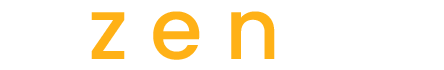
<style>
.page{position:relative;width:444px;height:70px;background:#ffffff}
.page>*{position:absolute;margin:0}
.t1{font:85px "Poppins-Medium";color:#ffb116}
.t2{font:85px "Poppins-Medium";color:#ffffff}
</style>
<div class="page">
<p class="t1" style="left:91px;top:11px;width:253px;height:49px">z e n <span class="t2">x</span></p>
</div>
